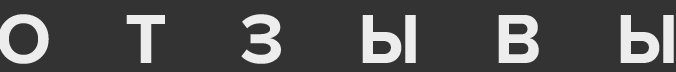
<style>
.page{position:relative;width:676px;height:72px;background:#333333}
.page>*{position:absolute;margin:0}
.t1{font:72px "ProximaNova-Bold";color:#ededed}
</style>
<div class="page">
<p class="t1" style="left:0px;top:14px;width:674px;height:50px">О    Т    З    Ы    В    Ы</p>
</div>
